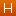
<style>
.page{position:relative;width:16px;height:16px}
.page>*{position:absolute;margin:0}
.t1{font:14px "Lato-Hairline";color:#ffffff}
</style>
<div class="page">
<p class="t1" style="left:4px;top:3px;width:8px;height:10px">H</p>
</div>
